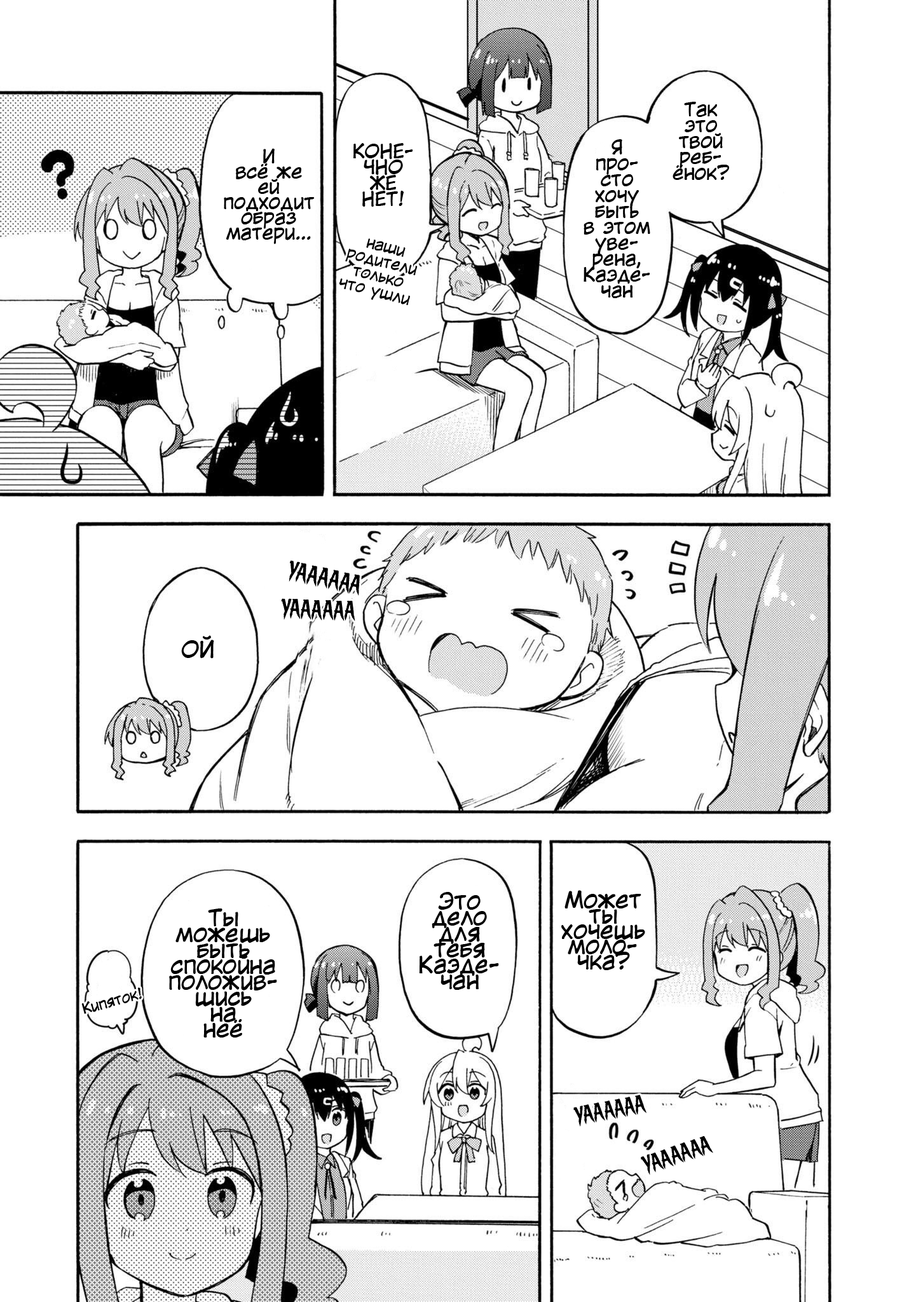
<style>
.page{position:relative;width:916px;height:1302px;background:#ffffff}
.page>*{position:absolute;margin:0}
.t1{font:19.1px/15.9px "KuraiVoice2";color:#000000}
.t2{font:19.1px/15.3px "KuraiVoice2";color:#000000}
.t3{font:15.3px/15.3px "KuraiVoice2";color:#000000}
.t4{font:22.9px "p_CCStickyFingers";color:#000000}
.t5{font:22.9px "KuraiVoice2";color:#000000}
.t6{font:22.9px/15.9px "KuraiVoice2";color:#000000}
.t7{font:22.9px/15.3px "KuraiVoice2";color:#000000}
.t8{font:14px "KuraiVoice2";color:#000000}
.t9{font:21.8px "p_CCStickyFingers";color:#000000}
.t10{font:21.6px "p_CCStickyFingers";color:#000000}
</style>
<div class="page">
<p class="t1" style="left:673px;top:102px;width:56px;height:78px;text-align:center">Так<br>это<br>твой<br>реб-<br>ёнок?</p>
<p class="t2" style="left:224px;top:148px;width:91px;height:96px;text-align:center">И<br>всё же<br>ей<br>подходит<br>образ<br>матери...</p>
<p class="t1" style="left:353px;top:143px;width:60px;height:64px;text-align:center">КОНЕ-<br>ЧНО<br>ЖЕ<br>НЕТ!</p>
<p class="t1" style="left:584px;top:139px;width:66px;height:159px;text-align:center">Я<br>про-<br>сто<br>хочу<br>быть<br>в этом<br>уве-<br>рена,<br>Каэде-<br>чан</p>
<p class="t3" style="left:339px;top:238px;width:79px;height:67px;text-align:center;rotate:14deg">наши<br>родители<br>только<br>что ушли</p>
<p class="t4" style="left:289px;top:560px;width:71px;height:36px;rotate:12deg">УАААААА</p>
<p class="t4" style="left:281px;top:598px;width:74px;height:23px;rotate:2deg">УАААААА</p>
<p class="t5" style="left:181px;top:635px;width:33px;height:24px">ОЙ</p>
<p class="t6" style="left:419px;top:892px;width:80px;height:98px;text-align:center">Это<br>дело<br>для<br>тебя<br>Каэде-<br>чан</p>
<p class="t7" style="left:561px;top:890px;width:84px;height:80px;text-align:center">Может<br>ты<br>хочешь<br>моло-<br>чка?</p>
<p class="t6" style="left:169px;top:908px;width:108px;height:129px;text-align:center">Ты<br>можешь<br>быть<br>спокойна<br>положив-<br>шись<br>на<br>неё</p>
<p class="t8" style="left:81px;top:987px;width:61px;height:27px;rotate:-15deg">Кипяток!</p>
<p class="t9" style="left:573px;top:1095px;width:73px;height:31px;rotate:-11deg">УАААААА</p>
<p class="t10" style="left:641px;top:1136px;width:72px;height:39px;rotate:-19deg">УАААААА</p>
</div>
